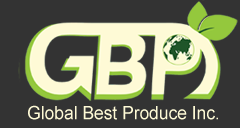
<style>
.page{position:relative;width:240px;height:128px;background:#333333}
.page>*{position:absolute;margin:0}
.t1{font:18.2px "ArialMT";color:#fefad6;scale:0.96 1}
</style>
<div class="page">
<p class="t1" style="left:28px;top:105px;width:190px;height:15px">Global Best Produce Inc.</p>
</div>
